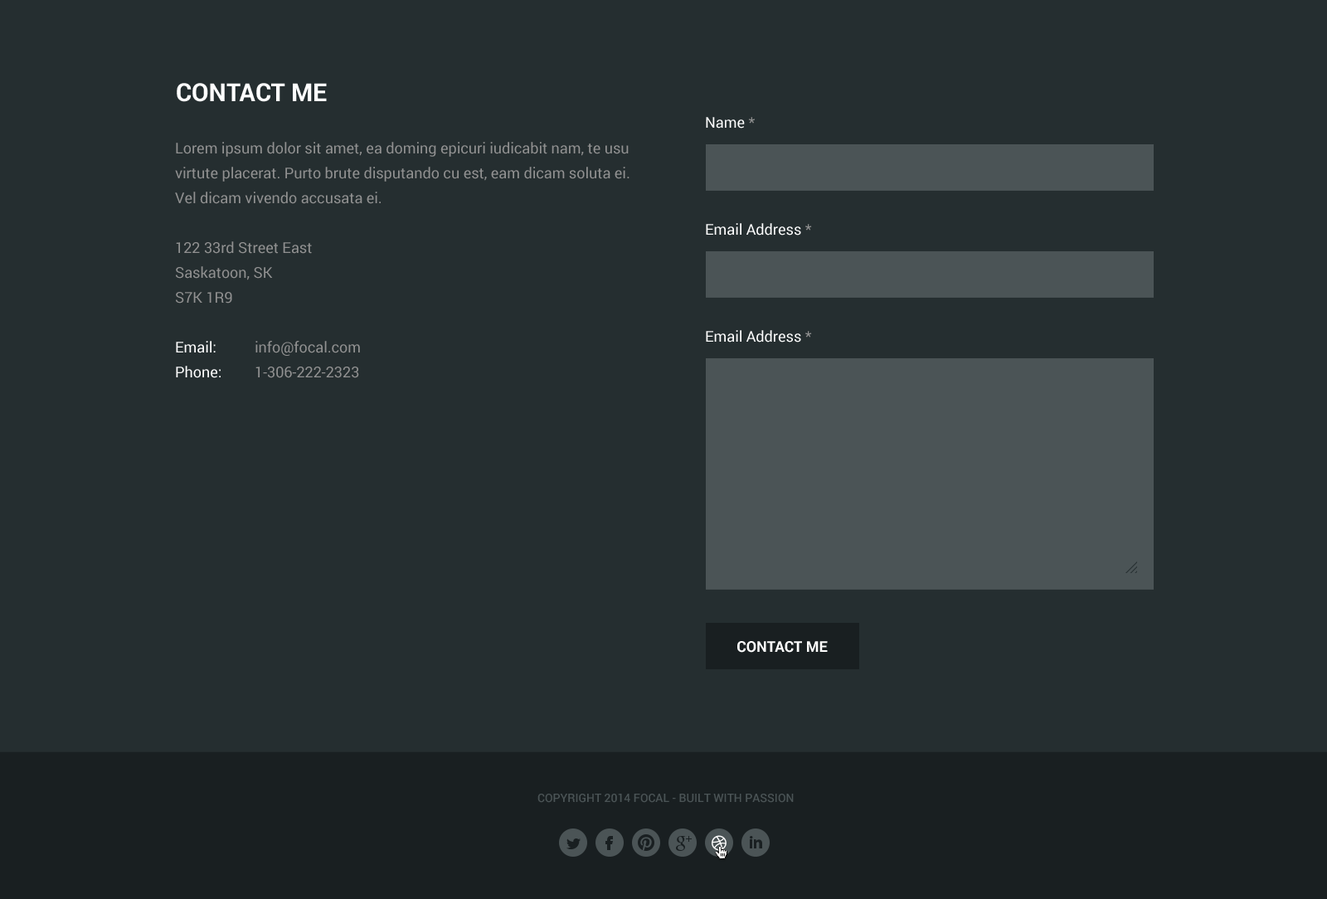
<style>
.page{position:relative;width:1327px;height:899px;background:#252e30}
.page>*{position:absolute;margin:0}
.t1{font:24.9px "Roboto-Bold";color:#ffffff;text-transform:uppercase}
.t2{font:14.9px "Roboto-Regular";color:#ffffff}
.t3{font:14.9px "Roboto-Regular";color:#919191}
.t4{font:14.9px/24.9px "Roboto-Regular";color:#919191}
.t5{font:14.9px/24.9px "Roboto-Regular";color:#ffffff}
.t6{font:14.9px "Roboto-Bold";color:#ffffff;text-transform:uppercase}
.t7{font:11.6px "Roboto-Medium";color:#4b5456;text-transform:uppercase}
</style>
<div class="page">
<p class="t1" style="left:177px;top:83px;width:150px;height:19px">Contact Me</p>
<p class="t2" style="left:706px;top:117px;width:49px;height:12px">Name <span class="t3">*</span></p>
<p class="t4" style="left:175px;top:142px;width:454px;height:236px">Lorem ipsum dolor sit amet, ea doming epicuri iudicabit nam, te usu virtute placerat. Purto brute disputando cu est, eam dicam soluta ei. Vel dicam vivendo accusata ei.<br><br>122 33rd Street East<br>Saskatoon, SK<br>S7K 1R9<br><br><span class="t5">Email:<br>Phone:</span></p>
<p class="t2" style="left:706px;top:223px;width:106px;height:12px">Email Address <span class="t3">*</span></p>
<p class="t4" style="left:255px;top:341px;width:105px;height:37px">info@focal.com<br>1-306-222-2323</p>
<p class="t2" style="left:706px;top:330px;width:106px;height:12px">Email Address <span class="t3">*</span></p>
<p class="t6" style="left:737px;top:641px;width:91px;height:12px">Contact Me</p>
<p class="t7" style="left:537px;top:794px;width:257px;height:9px">Copyright 2014 Focal - Built With Passion</p>
</div>
